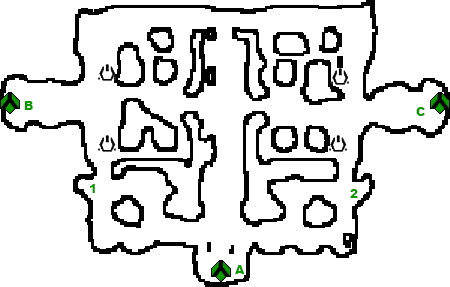
<style>
.page{position:relative;width:450px;height:287px;background:#ffffff}
.page>*{position:absolute;margin:0}
.t1{font:12px "Arial-Black";color:#0c9801}
</style>
<div class="page">
<p class="t1" style="left:24px;top:101px;width:9px;height:9px">B</p>
<p class="t1" style="left:416px;top:107px;width:9px;height:9px">C</p>
<p class="t1" style="left:90px;top:184px;width:5px;height:9px">1</p>
<p class="t1" style="left:350px;top:189px;width:8px;height:9px">2</p>
<p class="t1" style="left:235px;top:265px;width:10px;height:9px">A</p>
</div>
